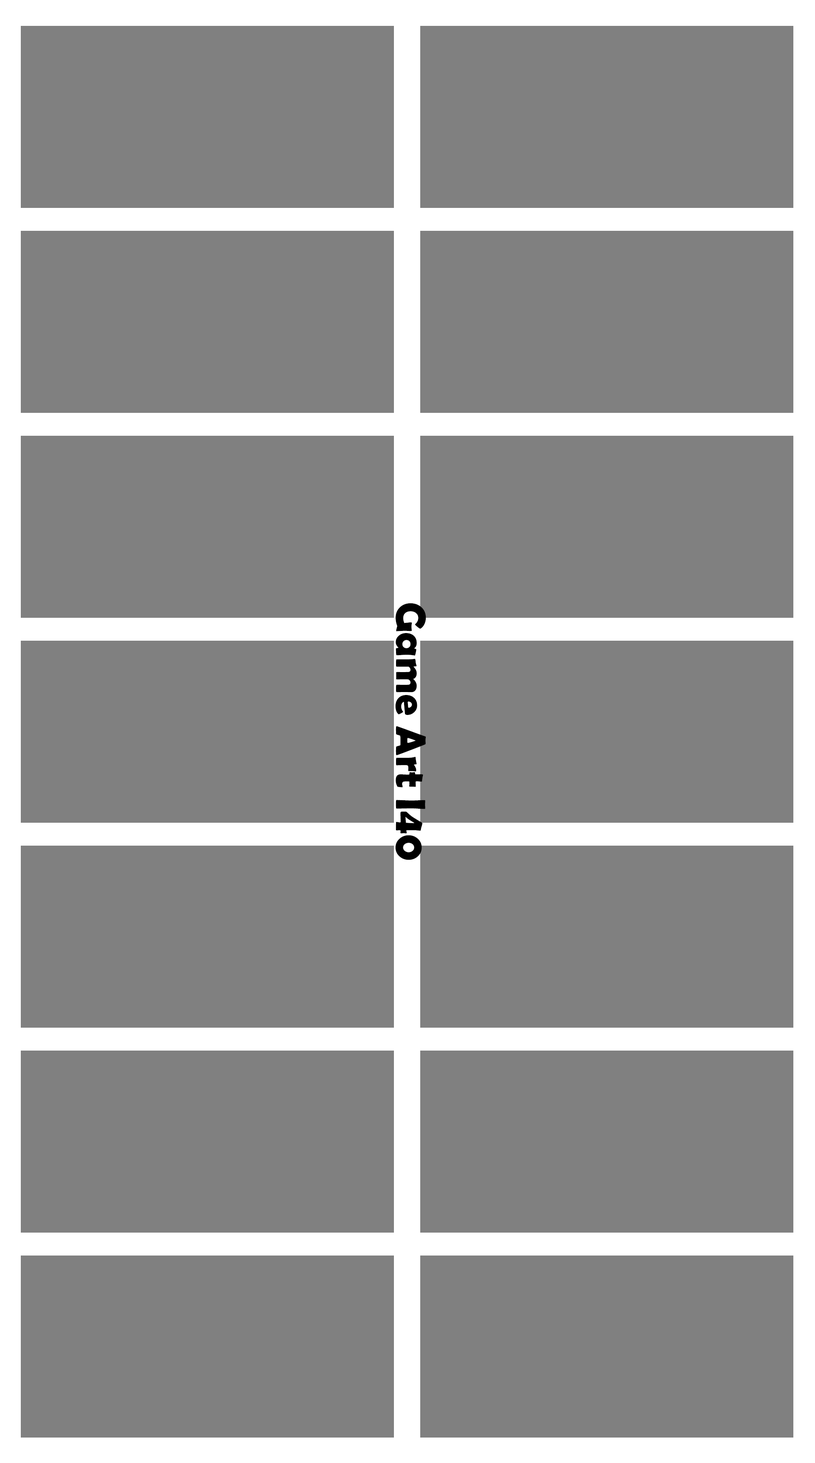
<style>
.page{position:relative;width:815px;height:1463px;background:#808080}
.page>*{position:absolute;margin:0}
.t1{font:42.4px "BerlinSansFBDemi-Bold";color:#000000}
</style>
<div class="page">
<p class="t1" style="left:395px;top:603px;width:31px;height:257px;rotate:90deg">Game Art I40</p>
</div>
